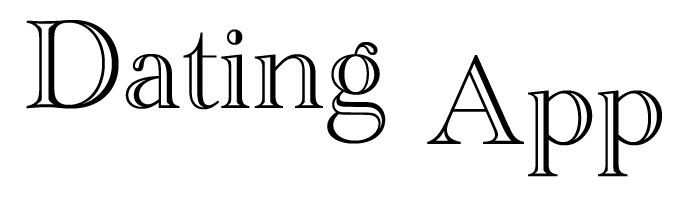
<style>
.page{position:relative;width:700px;height:200px;background:#ffffff}
.page>*{position:absolute;margin:0}
.t1{font:131px/36px "AcademyEngravedLetPlain";color:#000000}
</style>
<div class="page">
<p class="t1" style="left:26px;top:20px;width:636px;height:157px">Dating<br>           App</p>
</div>
